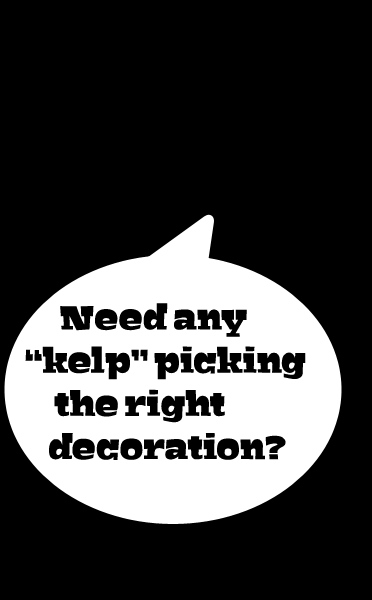
<style>
.page{position:relative;width:372px;height:600px;background:#000000}
.page>*{position:absolute;margin:0}
.t1{font:36px "Bigfish-Black";color:#000000}
</style>
<div class="page">
<p class="t1" style="left:25px;top:303px;width:281px;height:157px">Need any <br>“kelp” picking <br>     the right   <br>    decoration?</p>
</div>
